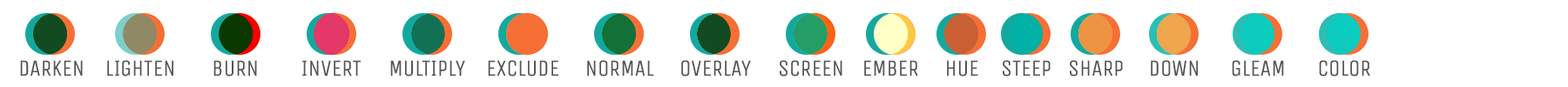
<style>
.page{position:relative;width:1568px;height:87px;background:#ffffff}
.page>*{position:absolute;margin:0}
.t1{font:23.2px "UnicaOne-Regular";letter-spacing:-0.01em;color:#555555;text-transform:uppercase}
</style>
<div class="page">
<p class="t1" style="left:20px;top:60px;width:63px;height:16px">DARKEN</p>
<p class="t1" style="left:107px;top:60px;width:66px;height:17px">LIGHTEN</p>
<p class="t1" style="left:213px;top:60px;width:44px;height:17px">BURN</p>
<p class="t1" style="left:302px;top:60px;width:59px;height:16px">INVERT</p>
<p class="t1" style="left:390px;top:60px;width:75px;height:17px">MULTIPLY</p>
<p class="t1" style="left:488px;top:60px;width:70px;height:17px">EXCLUDE</p>
<p class="t1" style="left:587px;top:60px;width:67px;height:17px">NORMAL</p>
<p class="t1" style="left:681px;top:60px;width:70px;height:17px">OVERLAY</p>
<p class="t1" style="left:780px;top:60px;width:62px;height:17px">SCREEN</p>
<p class="t1" style="left:864px;top:60px;width:54px;height:16px">EMBER</p>
<p class="t1" style="left:947px;top:60px;width:31px;height:17px">HUE</p>
<p class="t1" style="left:1003px;top:60px;width:48px;height:17px">STEEP</p>
<p class="t1" style="left:1070px;top:60px;width:53px;height:17px">SHARP</p>
<p class="t1" style="left:1151px;top:60px;width:47px;height:17px">DOWN</p>
<p class="t1" style="left:1232px;top:60px;width:52px;height:17px">GLEaM</p>
<p class="t1" style="left:1319px;top:60px;width:51px;height:17px">COLOR</p>
</div>
